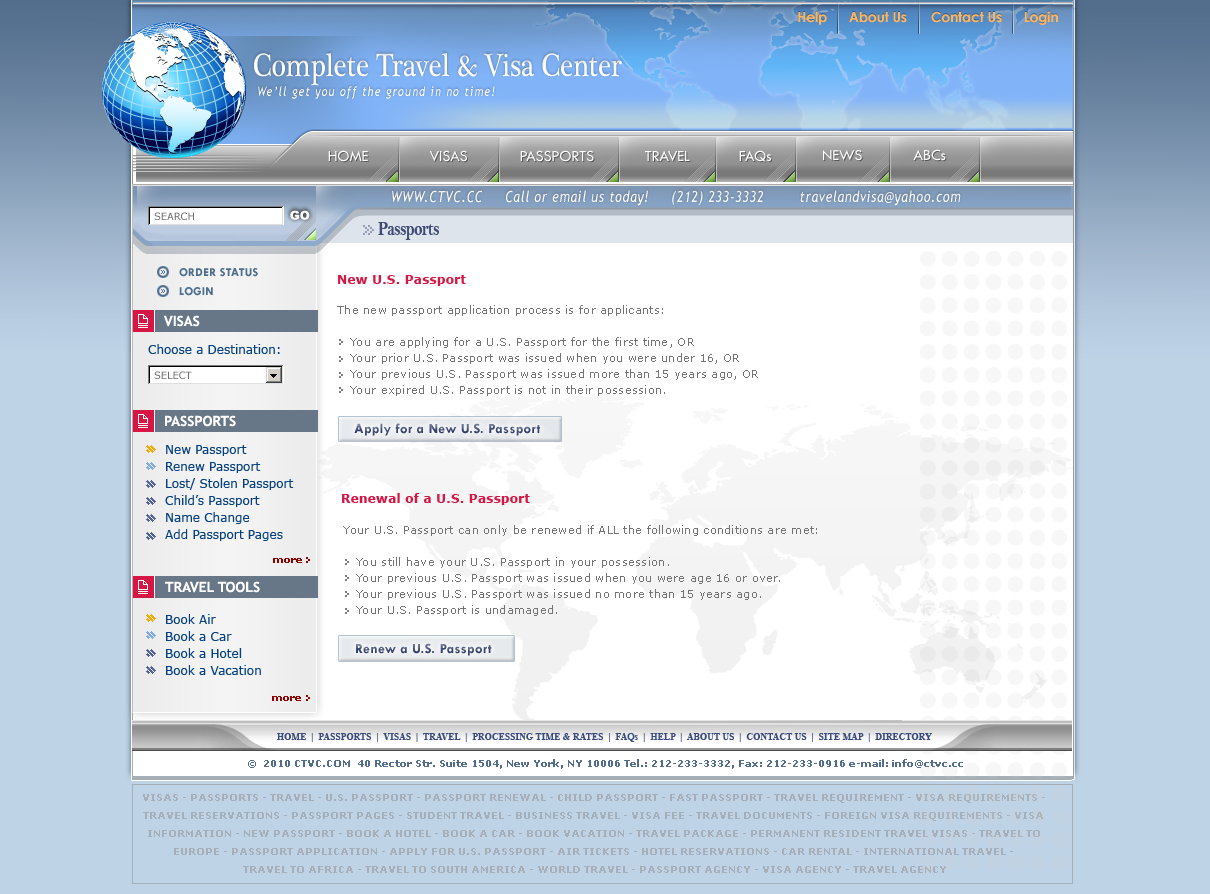
<style>
.page{position:relative;width:1210px;height:894px;background:#ffffff}
.page>*{position:absolute;margin:0}
.t1{font:14px "CenturyGothic-Bold";letter-spacing:-0.02em;color:#fbb561}
.t2{font:33px "PlantagenetCherokee";letter-spacing:0.001em;color:#ffffff;scale:0.82 1}
.t3{font:13.2px "TrebuchetMS-Italic";letter-spacing:0.1em;color:#ffffff;scale:0.82 1}
.t4{font:16px "TwCenMT-Regular";letter-spacing:-0.01em;color:#ffffff}
.t5{font:15.7px "TwCenMT-Regular";letter-spacing:-0.01em;color:#ffffff}
.t6{font:15.4px "TrebuchetMS-Italic";letter-spacing:0.05em;color:#ffffff;scale:0.82 1}
.t7{font:10px "Verdana";letter-spacing:-0.01em;color:#6b6b6b}
.t8{font:12px "Arial-Black";letter-spacing:-0.01em;color:#f8f9fb}
.t9{font:19.8px "BellMTBold";letter-spacing:-0.05em;color:#3f4b76;scale:0.82 1}
.t10{font:12px "TwCenMT-Bold";letter-spacing:0.02em;color:#4e6e90}
.t11{font:12px "Verdana-Bold";letter-spacing:0.025em;color:#d61643}
.t12{font:11px/16px "Verdana";letter-spacing:0.025em;color:#737373}
.t13{font:14px "TrebuchetMS-Bold";color:#ffffff}
.t14{font:12px "Verdana";color:#054082}
.t15{font:14px "TwCenMT-Bold";letter-spacing:0.025em;color:#424d76}
.t16{font:12px/22px "Verdana";color:#054082}
.t17{font:10px "Verdana-Bold";color:#930000}
.t18{font:14px "TwCenMT-Bold";letter-spacing:0.025em;color:#434f78}
.t19{font:10px "TimesNewRomanPS-BoldMT";letter-spacing:0.025em;color:#394b7c;scale:0.9 1}
.t20{font:10px "Verdana-Bold";color:#536e8d}
.t21{font:10px/18px "Verdana-Bold";color:#a6afb7}
</style>
<div class="page">
<p class="t1" style="left:798px;top:11px;width:260px;height:14px">Help      About Us       Contact Us      Login</p>
<p class="t2" style="left:254px;top:53px;width:368px;height:33px">Complete Travel &amp; Visa Center</p>
<p class="t3" style="left:258px;top:86px;width:237px;height:13px">We’ll get you off the ground in no time!</p>
<p class="t4" style="left:328px;top:150px;width:40px;height:12px">HOME</p>
<p class="t4" style="left:429px;top:150px;width:38px;height:12px">VISAS</p>
<p class="t4" style="left:520px;top:150px;width:74px;height:12px">PASSPORTS</p>
<p class="t4" style="left:645px;top:150px;width:45px;height:12px">TRAVEL</p>
<p class="t4" style="left:739px;top:150px;width:32px;height:12px">FAQs</p>
<p class="t5" style="left:823px;top:150px;width:39px;height:11px">NEWS</p>
<p class="t4" style="left:913px;top:149px;width:33px;height:12px">ABCs</p>
<p class="t6" style="left:392px;top:190px;width:569px;height:16px">WWW.CTVC.CC     Call or email us today!     (212) 233-3332        travelandvisa@yahoo.com</p>
<p class="t7" style="left:154px;top:212px;width:40px;height:8px">SEARCH</p>
<p class="t8" style="left:290px;top:210px;width:20px;height:10px">GO</p>
<p class="t9" style="left:378px;top:222px;width:61px;height:18px">Passports</p>
<p class="t10" style="left:179px;top:268px;width:79px;height:9px">ORDER STATUS</p>
<p class="t11" style="left:338px;top:275px;width:128px;height:11px">New U.S. Passport</p>
<p class="t10" style="left:179px;top:287px;width:34px;height:9px">LOGIN</p>
<p class="t12" style="left:337px;top:305px;width:421px;height:91px">The new passport application process is for applicants:<br><br>   You are applying for a U.S. Passport for the first time, OR<br>   Your prior U.S. Passport was issued when you were under 16, OR<br>   Your previous U.S. Passport was issued more than 15 years ago, OR<br>   Your expired U.S. Passport is not in their possession.</p>
<p class="t13" style="left:164px;top:315px;width:36px;height:12px">VISAS</p>
<p class="t14" style="left:148px;top:344px;width:132px;height:10px">Choose a Destination:</p>
<p class="t7" style="left:154px;top:371px;width:38px;height:8px">SELECT</p>
<p class="t13" style="left:165px;top:415px;width:71px;height:12px">PASSPORTS</p>
<p class="t15" style="left:354px;top:423px;width:186px;height:13px">Apply for a New U.S. Passport</p>
<p class="t16" style="left:165px;top:445px;width:129px;height:96px">New Passport<br>Renew Passport<br>Lost/ Stolen Passport<br>Child’s Passport<br>Name Change<br>Add Passport Pages</p>
<p class="t11" style="left:342px;top:493px;width:188px;height:12px">Renewal of a U.S. Passport</p>
<p class="t12" style="left:343px;top:525px;width:474px;height:91px">Your U.S. Passport can only be renewed if ALL the following conditions are met:<br><br>   You still have your U.S. Passport in your possession.<br>   Your previous U.S. Passport was issued when you were age 16 or over.<br>   Your previous U.S. Passport was issued no more than 15 years ago.<br>   Your U.S. Passport is undamaged.</p>
<p class="t17" style="left:273px;top:558px;width:29px;height:5px">more</p>
<p class="t13" style="left:165px;top:581px;width:95px;height:12px">TRAVEL TOOLS</p>
<p class="t16" style="left:166px;top:614px;width:95px;height:61px">Book Air<br>Book a Car<br>Book a Hotel<br>Book a Vacation</p>
<p class="t18" style="left:356px;top:643px;width:136px;height:13px">Renew a U.S. Passport</p>
<p class="t17" style="left:272px;top:696px;width:29px;height:5px">more</p>
<p class="t19" style="left:277px;top:733px;width:655px;height:9px">HOME  |  PASSPORTS  |  VISAS  |  TRAVEL  |  PROCESSING TIME &amp; RATES  |  FAQs  |  HELP  |  ABOUT US  |  CONTACT US  |  SITE MAP  |  DIRECTORY</p>
<p class="t20" style="left:248px;top:759px;width:715px;height:10px">©  2010 CTVC.COM  40 Rector Str. Suite 1504, New York, NY 10006 Tel.: 212-233-3332, Fax: 212-233-0916 e-mail: info@ctvc.cc</p>
<p class="t21" style="left:143px;top:794px;width:902px;height:79px;text-align:center">VISAS - PASSPORTS - TRAVEL - U.S. PASSPORT - PASSPORT RENEWAL - CHILD PASSPORT - FAST PASSPORT - TRAVEL REQUIREMENT - VISA REQUIREMENTS - <br>TRAVEL RESERVATIONS - PASSPORT PAGES - STUDENT TRAVEL - BUSINESS TRAVEL - VISA FEE - TRAVEL DOCUMENTS - FOREIGN VISA REQUIREMENTS - VISA <br>INFORMATION - NEW PASSPORT - BOOK A HOTEL - BOOK A CAR - BOOK VACATION - TRAVEL PACKAGE - PERMANENT RESIDENT TRAVEL VISAS - TRAVEL TO <br>EUROPE - PASSPORT APPLICATION - APPLY FOR U.S. PASSPORT - AIR TICKETS - HOTEL RESERVATIONS - CAR RENTAL - INTERNATIONAL TRAVEL - <br>TRAVEL TO AFRICA - TRAVEL TO SOUTH AMERICA - WORLD TRAVEL - PASSPORT AGENCY - VISA AGENCY - TRAVEL AGENCY</p>
</div>
